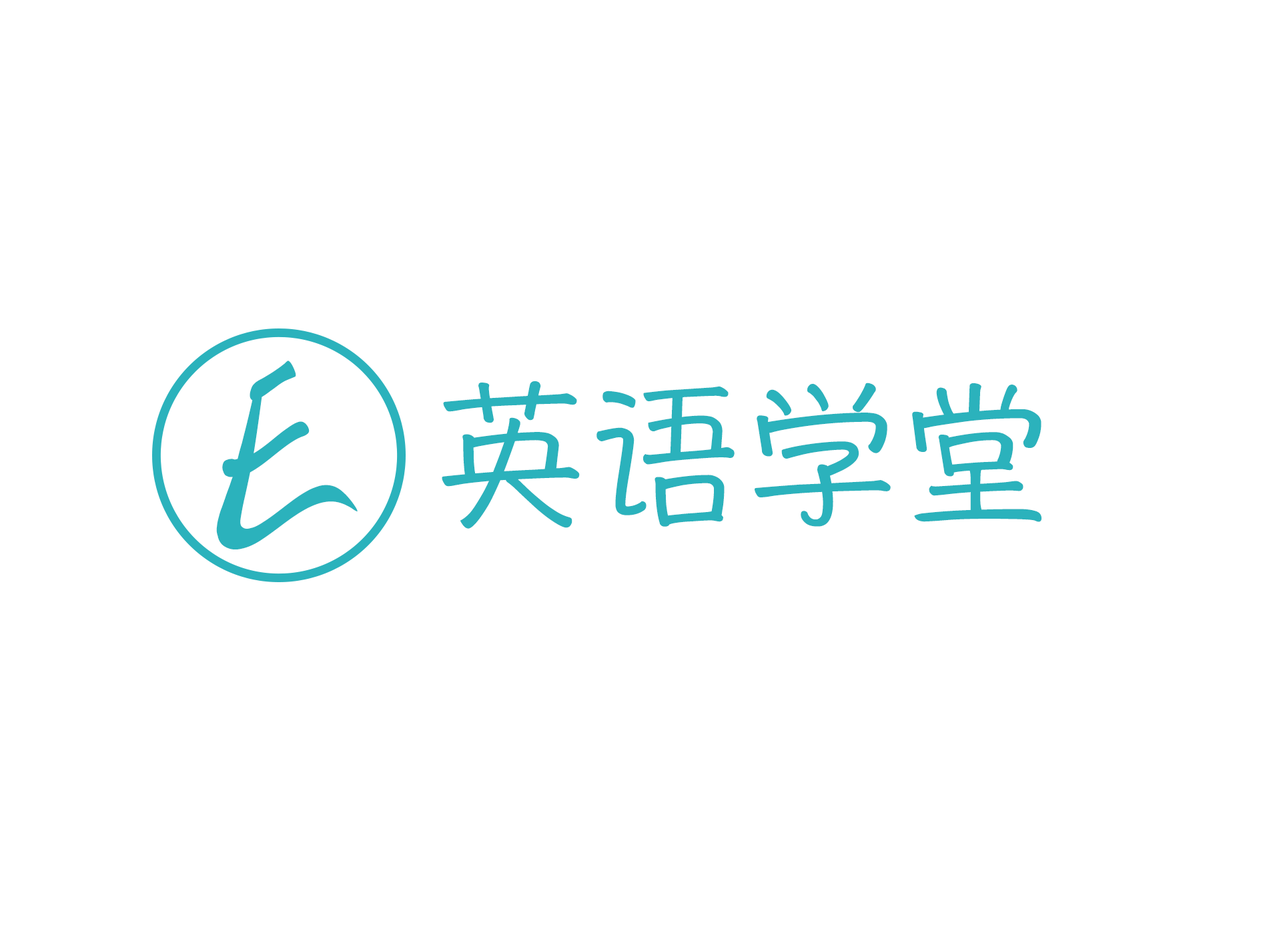
<style>
.page{position:relative;width:1261px;height:946px;background:#ffffff}
.page>*{position:absolute;margin:0}
.t1{font:239.1px "HannotateSC-W5";color:#2bb2bc}
.t2{font:155.7px "HannotateSC-W5";color:#2bb2bc}
</style>
<div class="page">
<p class="t1" style="left:216px;top:360px;width:142px;height:189px">E</p>
<p class="t2" style="left:442px;top:381px;width:600px;height:147px">英语学堂</p>
</div>
